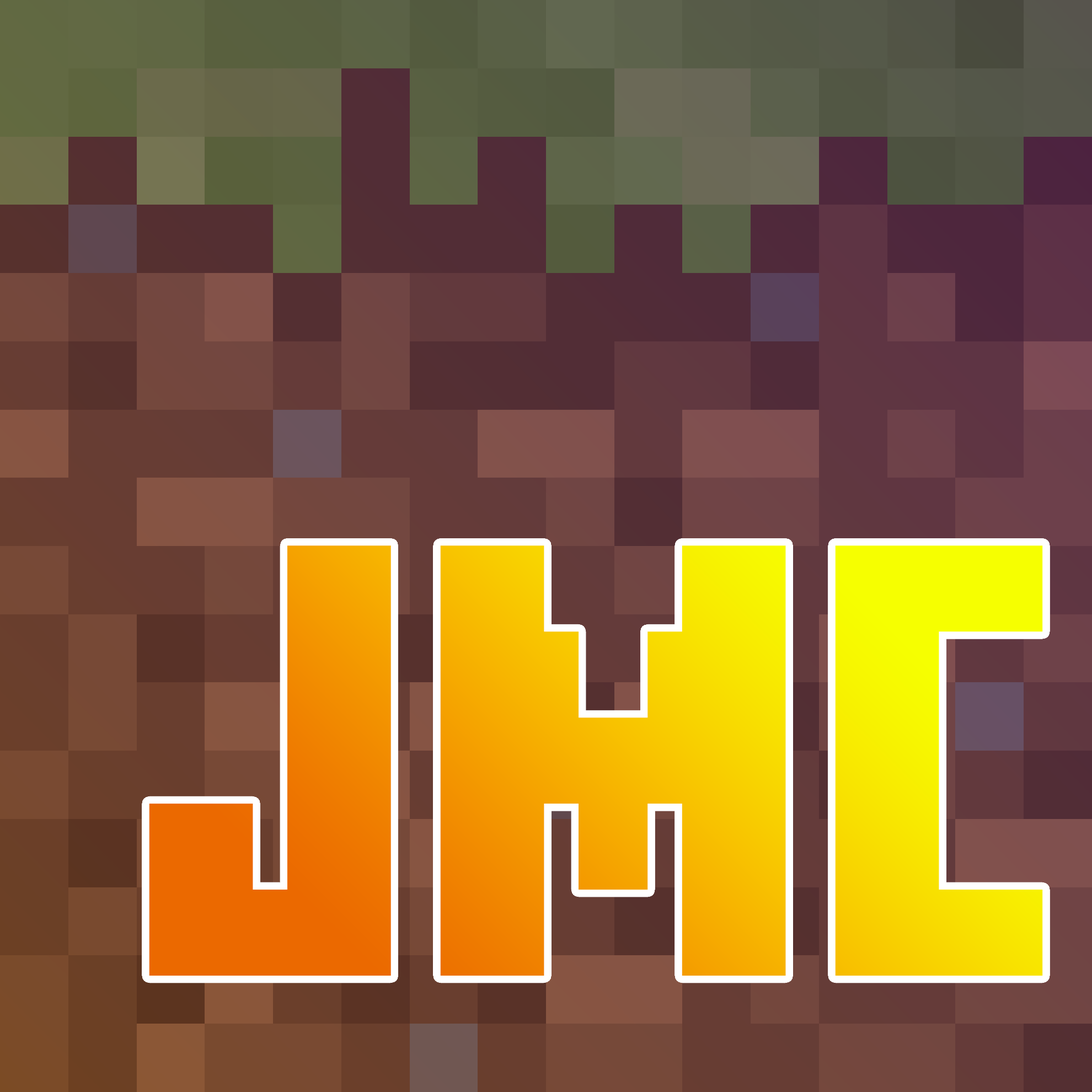
<style>
.page{position:relative;width:1092px;height:1092px}
.page>*{position:absolute;margin:0}
.t1{font:614.2px "MinecraftTen";scale:0.8 1}
</style>
<div class="page">
<p class="t1" style="left:149px;top:545px;width:894px;height:431px">JMC</p>
</div>
